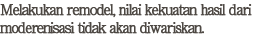
<style>
.page{position:relative;width:253px;height:37px;background:#ffffff}
.page>*{position:absolute;margin:0}
.t1{font:15px "RyuminPro-Light";letter-spacing:-0.08em;color:#4d4843;font-weight:bold;scale:0.94 1}
</style>
<div class="page">
<p class="t1" style="left:0px;top:4px;width:252px;height:30px">Melakukan remodel, nilai kekuatan hasil dari<br>moderenisasi tidak akan diwariskan.</p>
</div>
